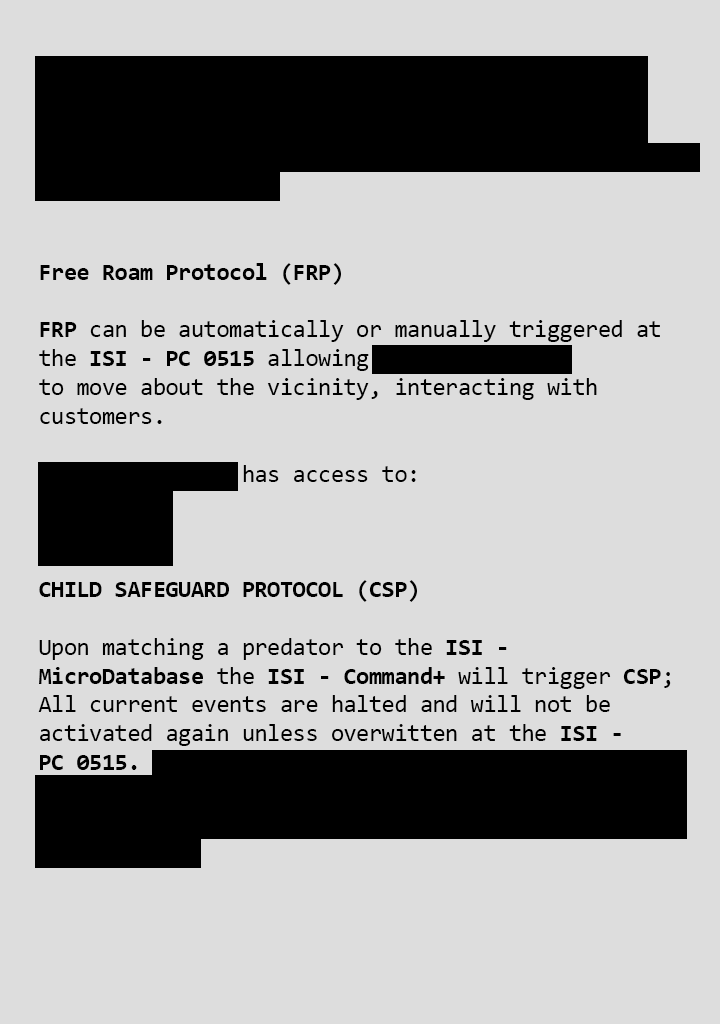
<style>
.page{position:relative;width:720px;height:1024px;background:#dddddd}
.page>*{position:absolute;margin:0}
.t1{font:24px/28.9px "Consolas";letter-spacing:-0.02em;color:#000000}
.t2{font:24px/100.2px "Consolas";letter-spacing:-0.02em;color:#000000}
.t3{font:24px/28.9px "Consolas-Bold";letter-spacing:-0.02em;color:#000000}
</style>
<div class="page">
<p class="t1" style="left:38px;top:60px;width:658px;height:802px"><span class="t2">Jaakko is to be placed by the exit/entrance</span>, <br>with a direct connection to the <span class="t3">ISI - Command+ <br></span>interface and <span class="t3">ISI Survelance Pro</span>, through serial <br>ports or FM Transmitter for roaming functionalities, <br>maximum 200 meters. <br><br><br><span class="t3">Free Roam Protocol (FRP)<br><br>FRP</span> can be automatically or manually triggered at<br>the <span class="t3">ISI - PC 0515 </span>allowing Funko-Fun Derek <br>to move about the vicinity, interacting with <br>customers.<br><br>Funko-Fun Derek has access to: <br>All floors<br><br><br><span class="t3">CHILD SAFEGUARD PROTOCOL (CSP)<br><br></span>Upon matching a predator to the <span class="t3">ISI - <br>MicroDatabase </span>the <span class="t3">ISI - Command+</span> will trigger <span class="t3">CSP</span>;<br>All current events are halted and will not be <br>activated again unless overwitten at the <span class="t3">ISI -<br>PC 0515. </span>Once Jaakko has seen the predator, he will<br>not lose sight of them utilising the <span class="t3">ISI Survelance<br>Pro</span>, pursuing and aprehending the caught predator <br>immediately.</p>
</div>
